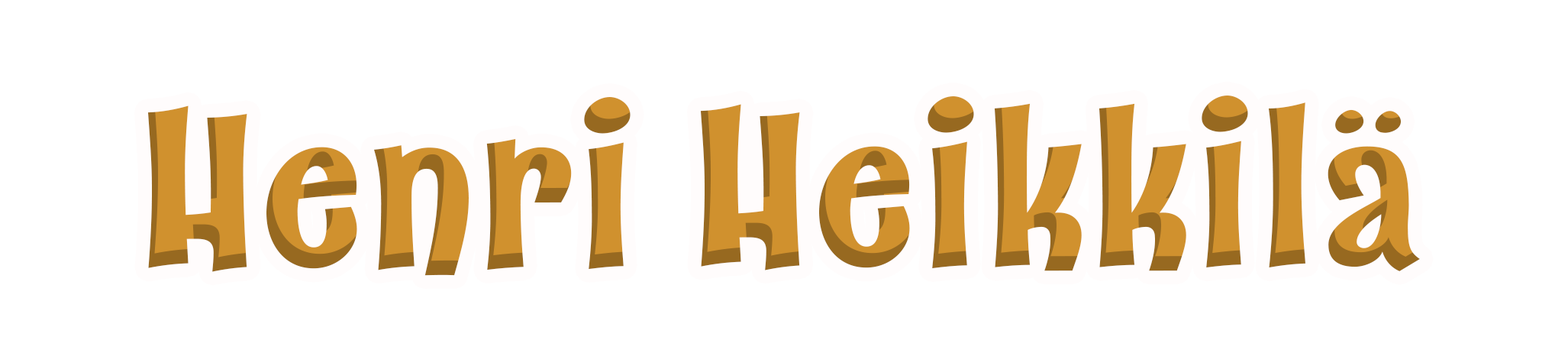
<style>
.page{position:relative;width:1568px;height:353px;background:#ffffff}
.page>*{position:absolute;margin:0}
.t1{font:215.7px "Catseye-Bold";color:#d0912e}
</style>
<div class="page">
<p class="t1" style="left:147px;top:95px;width:1273px;height:181px">Henri Heikkilä</p>
</div>
